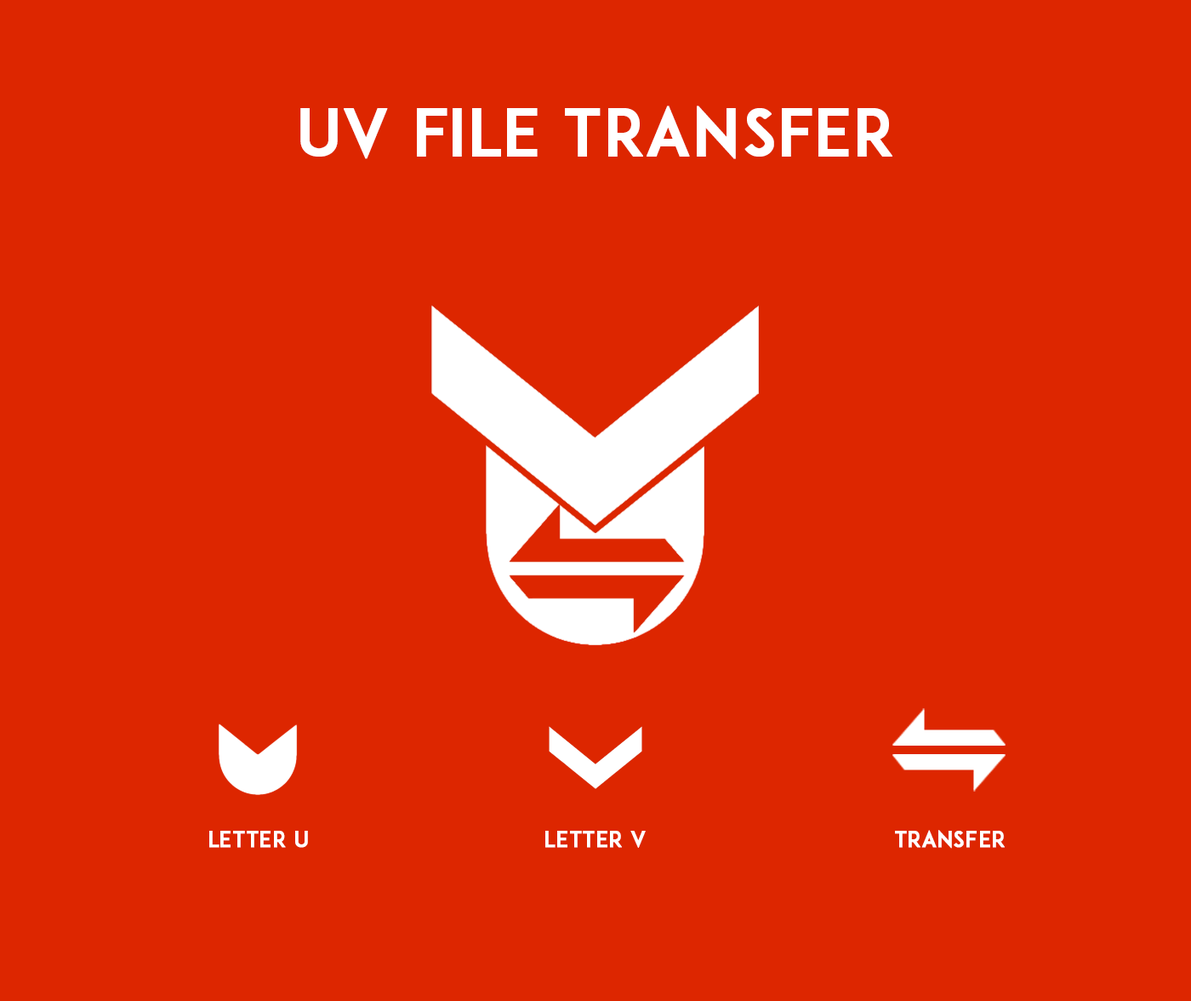
<style>
.page{position:relative;width:1191px;height:1001px;background:#dd2600}
.page>*{position:absolute;margin:0}
.t1{font:63.8px "ADAM.CGPRO";letter-spacing:0.01em;color:#ffffff;font-weight:bold}
.t2{font:21.3px "ADAM.CGPRO";letter-spacing:0.01em;color:#ffffff;font-weight:bold}
</style>
<div class="page">
<p class="t1" style="left:300px;top:106px;width:593px;height:53px">uv file transfer</p>
<p class="t2" style="left:209px;top:831px;width:99px;height:17px">LETTER U</p>
<p class="t2" style="left:546px;top:831px;width:100px;height:17px">LETTER V</p>
<p class="t2" style="left:895px;top:830px;width:110px;height:18px">TRANSFER</p>
</div>
